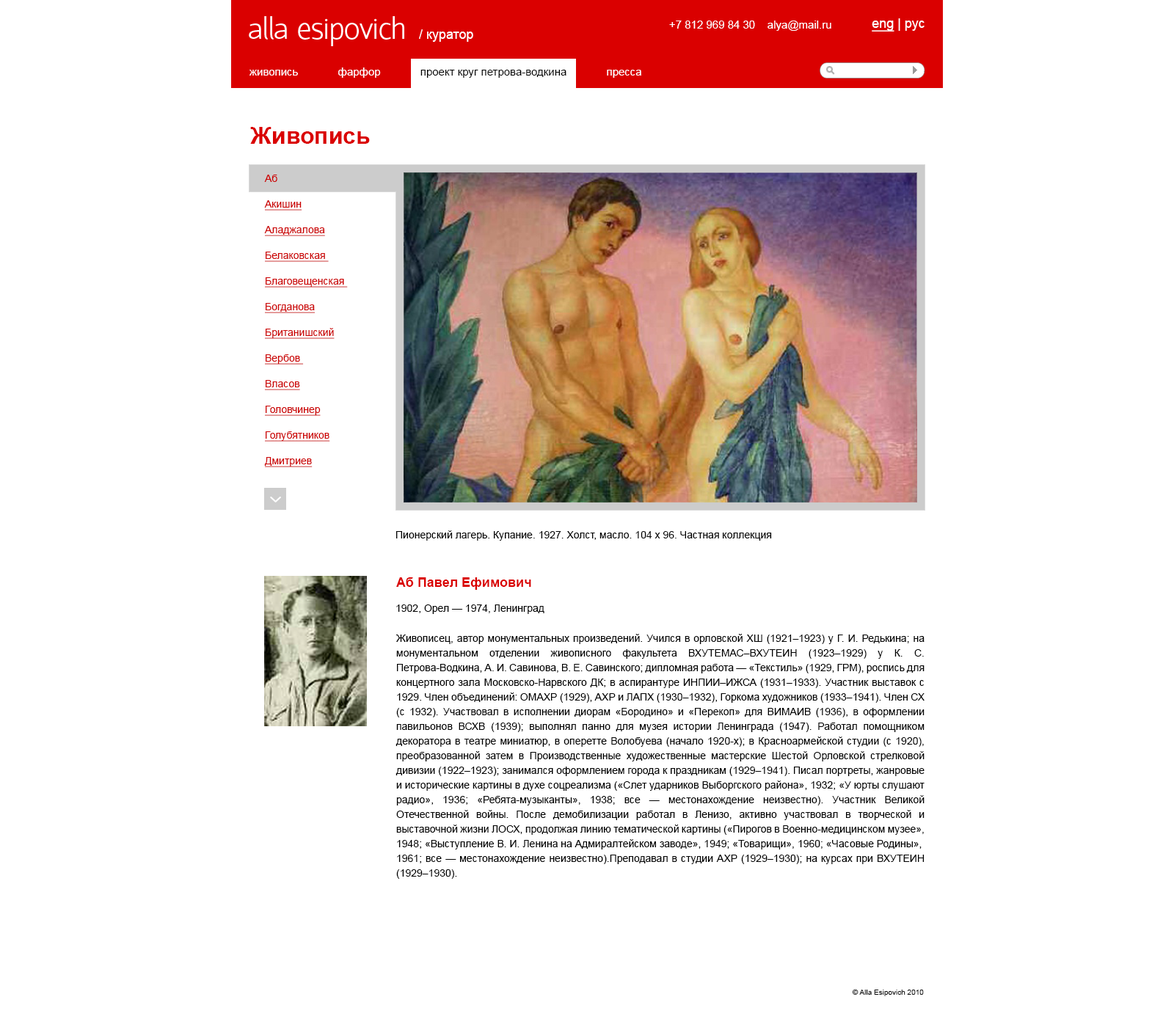
<style>
.page{position:relative;width:1174px;height:1016px;background:#ffffff}
.page>*{position:absolute;margin:0}
.t1{font:13.2px "ArialMT";color:#ffffff}
.t2{font:11px "ArialMT";color:#ffffff}
.t3{font:13.2px "ArialMT";color:#ffffff;text-decoration:underline}
.t4{font:11px "ArialMT";color:#000000}
.t5{font:23.5px "Arial-BoldMT";color:#da0000}
.t6{font:10.3px/25.7px "ArialMT";color:#cc0000;text-decoration:underline}
.t7{font:10.3px/25.7px "ArialMT";color:#cc0000}
.t8{font:10.3px "ArialMT";color:#000000}
.t9{font:13.2px "Arial-BoldMT";color:#da0000}
.t10{font:10.3px/14.7px "ArialMT";color:#000000}
.t11{font:7.3px "ArialMT";color:#010101}
</style>
<div class="page">
<p class="t1" style="left:419px;top:29px;width:54px;height:13px">/ куратор</p>
<p class="t2" style="left:669px;top:21px;width:162px;height:10px">+7 812 969 84 30    alya@mail.ru</p>
<p class="t1" style="left:871px;top:18px;width:53px;height:14px"><span class="t3">eng</span> | рус</p>
<p class="t2" style="left:249px;top:67px;width:392px;height:11px">живопись             фарфор            <span class="t4"> проект круг петрова-водкина   </span>          пресса</p>
<p class="t5" style="left:250px;top:127px;width:120px;height:17px">Живопись</p>
<p class="t6" style="left:264px;top:175px;width:84px;height:292px"><span class="t7">Аб <br></span>Акишин<br>Аладжалова<br>Белаковская <br>Благовещенская <br>Богданова<br>Британишский<br>Вербов <br>Власов<br>Головчинер<br>Голубятников<br>Дмитриев</p>
<p class="t8" style="left:396px;top:530px;width:376px;height:11px">Пионерский лагерь. Купание. 1927. Холст, масло. 104 х 96. Частная коллекция</p>
<p class="t9" style="left:396px;top:577px;width:135px;height:13px">Аб Павел Ефимович</p>
<p class="t8" style="left:396px;top:604px;width:148px;height:10px">1902, Орел — 1974, Ленинград</p>
<p class="t10" style="left:395px;top:634px;width:529px;height:245px;text-align:justify">Живописец, автор монументальных произведений. Учился в орловской ХШ (1921–1923) у Г. И. Редькина; на монументальном отделении живописного факультета ВХУТЕМАС–ВХУТЕИН (1923–1929) у К. С. Петрова-Водкина, А. И. Савинова, В. Е. Савинского; дипломная работа — «Текстиль» (1929, ГРМ), роспись для концертного зала Московско-Нарвского ДК; в аспирантуре ИНПИИ–ИЖСА (1931–1933). Участник выставок с 1929. Член объединений: ОМАХР (1929), АХР и ЛАПХ (1930–1932), Горкома художников (1933–1941). Член СХ (с 1932). Участвовал в исполнении диорам «Бородино» и «Перекоп» для ВИМАИВ (1936), в оформлении павильонов ВСХВ (1939); выполнял панно для музея истории Ленинграда (1947). Работал помощником декоратора в театре миниатюр, в оперетте Волобуева (начало 1920-х); в Красноармейской студии (с 1920), преобразованной затем в Производственные художественные мастерские Шестой Орловской стрелковой дивизии (1922–1923); занимался оформлением города к праздникам (1929–1941). Писал портреты, жанровые и исторические картины в духе соцреализма («Слет ударников Выборгского района», 1932; «У юрты слушают радио», 1936; «Ребята-музыканты», 1938; все — местонахождение неизвестно). Участник Великой Отечественной войны. После демобилизации работал в Ленизо, активно участвовал в творческой и выставочной жизни ЛОСХ, продолжая линию тематической картины («Пирогов в Военно-медицинском музее», 1948; «Выступление В. И. Ленина на Адмиралтейском заводе», 1949; «Товарищи», 1960; «Часовые Родины»,<br>1961; все — местонахождение неизвестно).Преподавал в студии АХР (1929–1930); на курсах при ВХУТЕИН (1929–1930).</p>
<p class="t11" style="left:852px;top:989px;width:72px;height:7px">© Alla Esipovich 2010</p>
</div>
